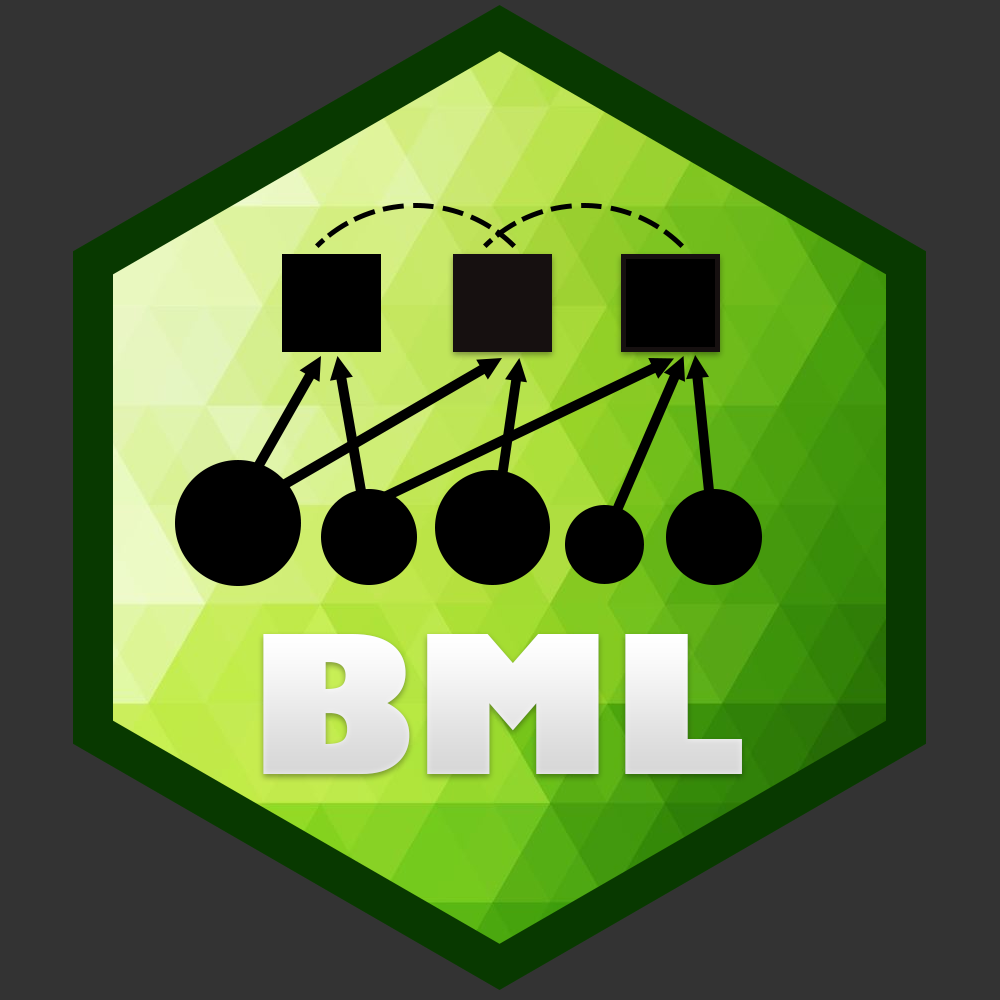
<style>
.page{position:relative;width:1000px;height:1000px;background:#333333}
.page>*{position:absolute;margin:0}
.t1{font:187.5px "GillSans-UltraBold";color:#ffffff}
</style>
<div class="page">
<p class="t1" style="left:263px;top:634px;width:479px;height:140px">BML</p>
</div>
